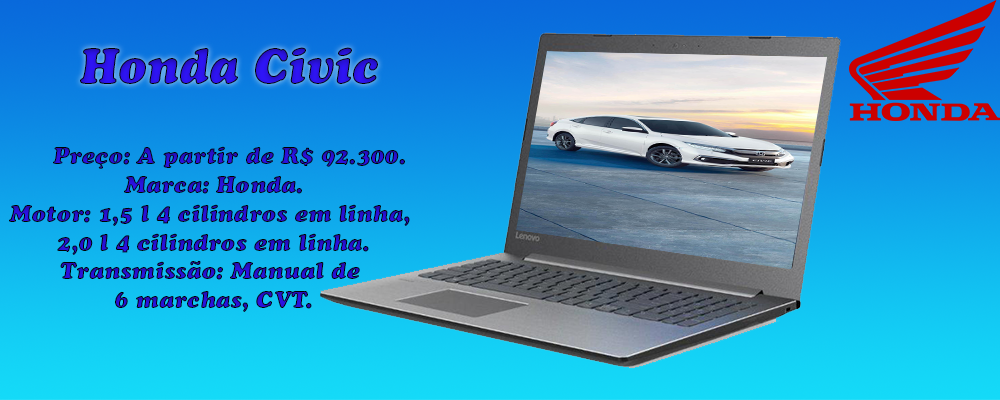
<style>
.page{position:relative;width:1000px;height:400px}
.page>*{position:absolute;margin:0}
.t1{font:48px "CooperBlackStd-Italic"}
.t2{font:24px "CooperBlackStd-Italic"}
</style>
<div class="page">
<p class="t1" style="left:80px;top:47px;width:298px;height:37px">Honda Civic</p>
<p class="t2" style="left:53px;top:146px;width:352px;height:23px">Preço: A partir de R$ 92.300.</p>
<p class="t2" style="left:9px;top:176px;width:401px;height:136px;text-align:center">Marca: Honda.<br>Motor: 1,5 l 4 cilindros em linha, <br>2,0 l 4 cilindros em linha.<br>Transmissão: Manual de <br>6 marchas, CVT.</p>
</div>
